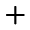
<style>
.page{position:relative;width:30px;height:30px;background:#ffffff}
.page>*{position:absolute;margin:0}
.t1{font:36px "Gulim";color:#000000}
.t2{font:30px "Gulim";color:#000000}
</style>
<div class="page">
<p class="t1" style="left:6px;top:6px;width:19px;height:19px">+<br><span class="t2">*</span></p>
</div>
